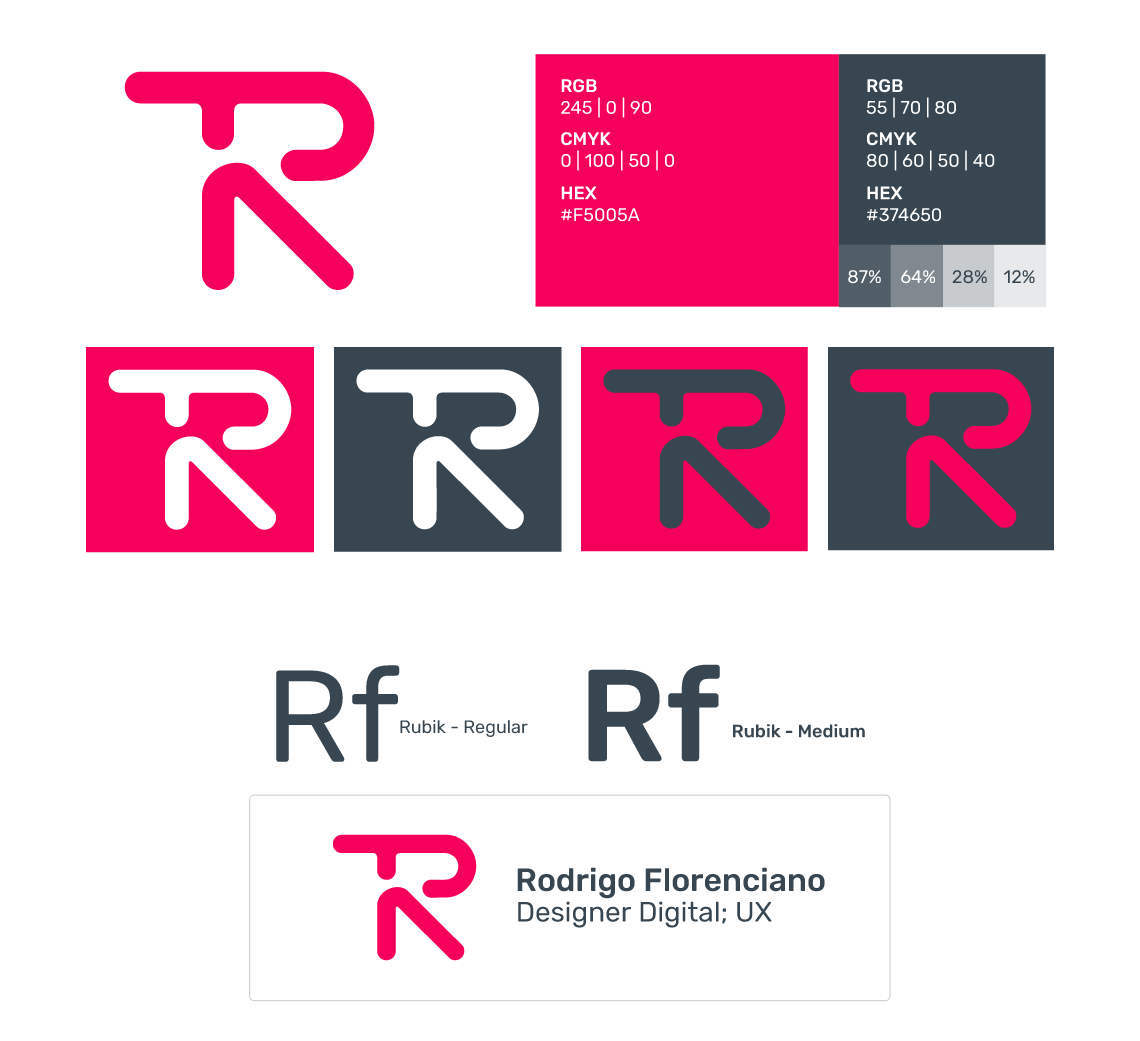
<style>
.page{position:relative;width:1140px;height:1041px;background:#ffffff}
.page>*{position:absolute;margin:0}
.t1{font:18.1px "Rubik-Regular";color:#ffffff}
.t2{font:18.1px "Rubik-Medium";color:#ffffff}
.t3{font:18.1px "Rubik-Regular";color:#374650}
.t4{font:130.1px "Rubik-Regular";color:#374650}
.t5{font:130.1px "Rubik-Medium";color:#374650}
.t6{font:18px "Rubik-Regular";color:#374650}
.t7{font:18px "Rubik-Medium";color:#374650}
.t8{font:32px "Rubik-Medium";color:#374650}
.t9{font:28px "Rubik-Regular";color:#374650}
</style>
<div class="page">
<p class="t1" style="left:561px;top:79px;width:90px;height:39px"><span class="t2">RGB<br></span>245 | 0 | 90</p>
<p class="t1" style="left:866px;top:79px;width:90px;height:39px"><span class="t2">RGB<br></span>55 | 70 | 80</p>
<p class="t1" style="left:561px;top:132px;width:113px;height:39px"><span class="t2">CMYK<br></span>0 | 100 | 50 | 0</p>
<p class="t1" style="left:867px;top:132px;width:128px;height:39px"><span class="t2">CMYK<br></span>80 | 60 | 50 | 40</p>
<p class="t1" style="left:561px;top:186px;width:79px;height:36px"><span class="t2">HEX<br></span>#F5005A</p>
<p class="t1" style="left:867px;top:186px;width:74px;height:36px"><span class="t2">HEX<br></span>#374650</p>
<p class="t1" style="left:848px;top:270px;width:33px;height:14px">87%</p>
<p class="t1" style="left:901px;top:270px;width:34px;height:14px">64%</p>
<p class="t3" style="left:952px;top:270px;width:35px;height:14px">28%</p>
<p class="t3" style="left:1004px;top:270px;width:31px;height:13px">12%</p>
<p class="t4" style="left:276px;top:665px;width:124px;height:97px">Rf</p>
<p class="t5" style="left:588px;top:664px;width:132px;height:98px">Rf</p>
<p class="t6" style="left:400px;top:720px;width:128px;height:17px">Rubik - Regular</p>
<p class="t7" style="left:733px;top:724px;width:132px;height:14px">Rubik - Medium</p>
<p class="t8" style="left:517px;top:867px;width:308px;height:32px">Rodrigo Florenciano</p>
<p class="t9" style="left:518px;top:901px;width:254px;height:27px">Designer Digital; UX</p>
</div>
